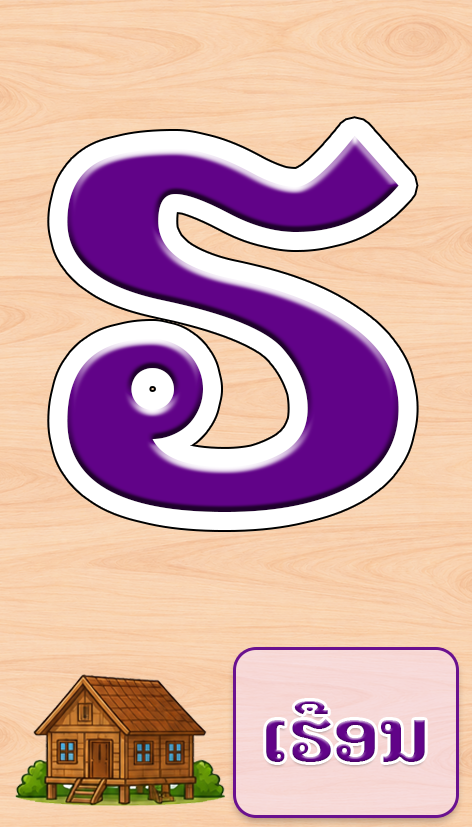
<style>
.page{position:relative;width:472px;height:827px}
.page>*{position:absolute;margin:0}
.t1{font:645.8px "Phetsarath-Bold";letter-spacing:0.04em;color:#610388}
.t2{font:75px "Phetsarath-Bold";letter-spacing:-0.04em;color:#610388}
</style>
<div class="page">
<p class="t1" style="left:67px;top:136px;width:332px;height:376px">ຮ</p>
<p class="t2" style="left:266px;top:701px;width:159px;height:61px">ເຮືອນ</p>
</div>
